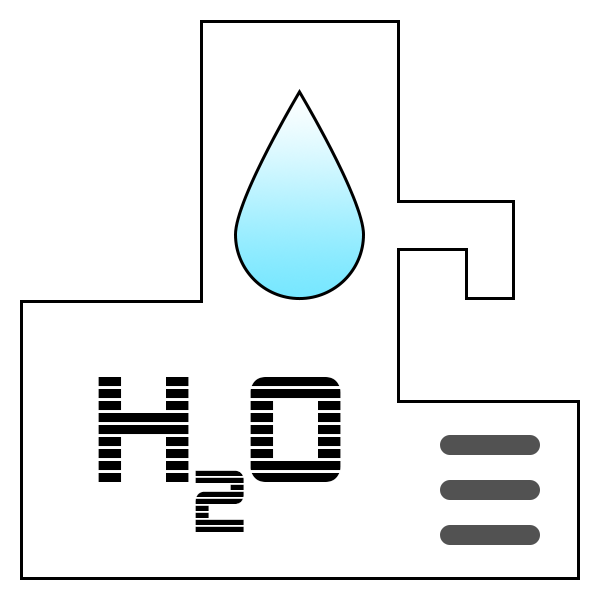
<style>
.page{position:relative;width:600px;height:600px;background:#ffffff}
.page>*{position:absolute;margin:0}
.t1{font:150px "AlienEncounters";color:#000000}
</style>
<div class="page">
<p class="t1" style="left:98px;top:377px;width:243px;height:155px">H2O</p>
</div>
